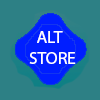
<style>
.page{position:relative;width:100px;height:100px;background:#2d8085}
.page>*{position:absolute;margin:0}
.t1{font:17.5px "MyriadPro-Regular";color:#ffffff}
</style>
<div class="page">
<p class="t1" style="left:29px;top:31px;width:47px;height:33px">ALT<br>STORE</p>
</div>
